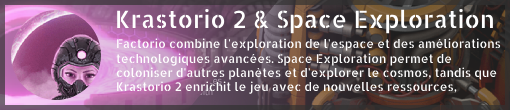
<style>
.page{position:relative;width:510px;height:110px}
.page>*{position:absolute;margin:0}
.t1{font:24px "AllertaStencil-Regular";color:#ffffff}
.t2{font:12px "AllertaStencil-Regular";color:#ffffff}
</style>
<div class="page">
<p class="t1" style="left:117px;top:8px;width:376px;height:26px">Krastorio 2 &amp; Space Exploration</p>
<p class="t2" style="left:116px;top:38px;width:385px;height:56px">Factorio combine l'exploration de l'espace et des améliorations technologiques avancées. Space Exploration permet de coloniser d'autres planètes et d'explorer le cosmos, tandis que Krastorio 2 enrichit le jeu avec de nouvelles ressources, machines, et équilibrages stratégiques.</p>
</div>
